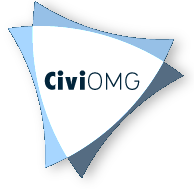
<style>
.page{position:relative;width:194px;height:189px;background:#ffffff}
.page>*{position:absolute;margin:0}
.t1{font:24px "Futura-CondensedExtraBold";color:#02253b}
.t2{font:24px "Typ1451";color:#02253b}
</style>
<div class="page">
<p class="t1" style="left:44px;top:70px;width:96px;height:20px">Civi<span class="t2">OMG</span></p>
</div>
